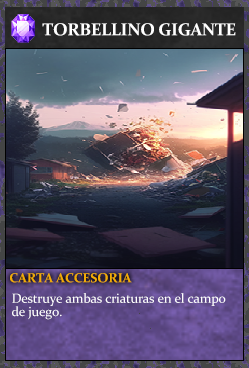
<style>
.page{position:relative;width:249px;height:368px}
.page>*{position:absolute;margin:0}
.t1{font:17.3px "Constantia-Bold";letter-spacing:-0.02em;color:#ffffff}
.t2{font:13.3px "Constantia-Bold";letter-spacing:-0.02em;color:#f2ac05}
.t3{font:13.3px/13.3px "Constantia";letter-spacing:-0.02em;color:#ffffff}
</style>
<div class="page">
<p class="t1" style="left:42px;top:23px;width:194px;height:13px">TORBELLINO GIGANTE</p>
<p class="t2" style="left:10px;top:273px;width:122px;height:10px">CARTA ACCESORIA</p>
<p class="t3" style="left:12px;top:293px;width:214px;height:27px">Destruye ambas criaturas en el campo<br>de juego.</p>
</div>
